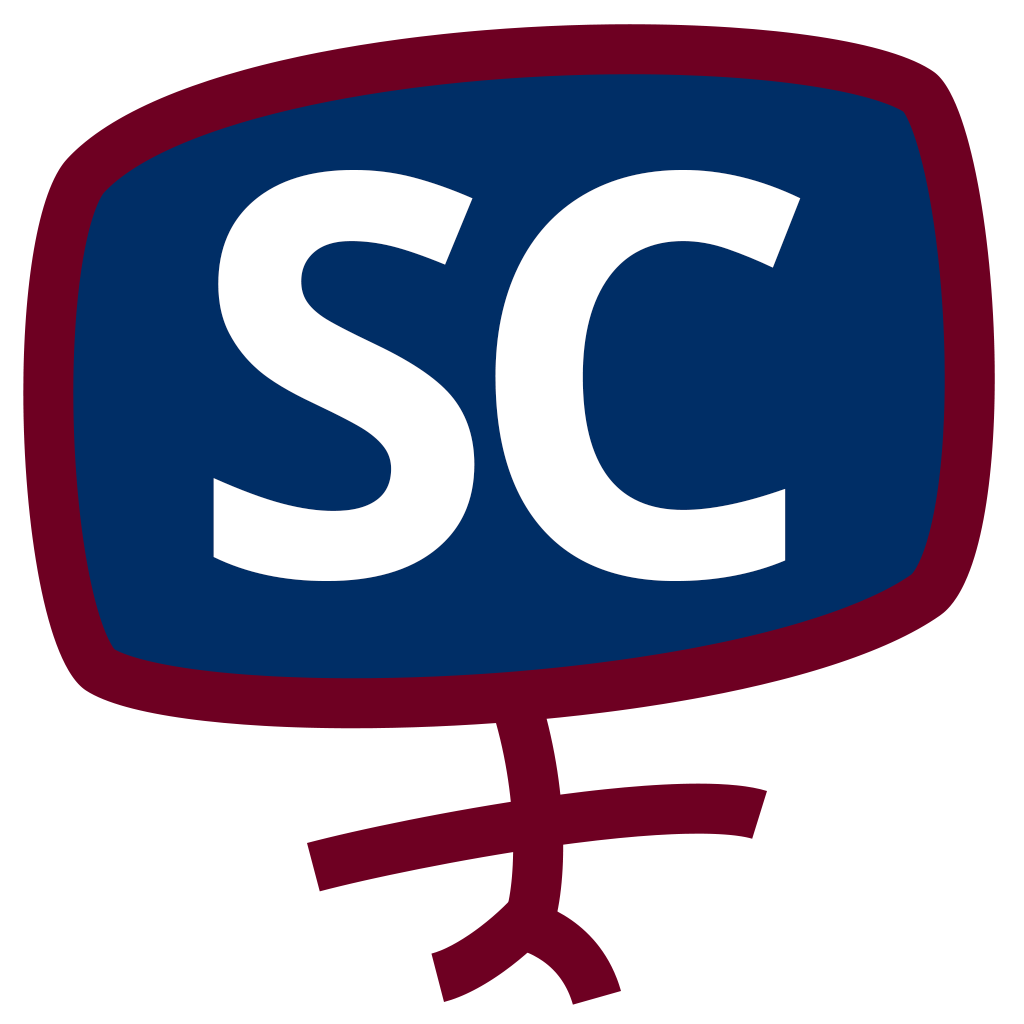
<style>
.page{position:relative;width:1024px;height:1024px;background:#ffffff}
.page>*{position:absolute;margin:0}
.t1{font:560px "OpenSans-Bold";letter-spacing:-0.06em;color:#ffffff}
</style>
<div class="page">
<p class="t1" style="left:213px;top:170px;width:588px;height:411px">SC</p>
</div>
